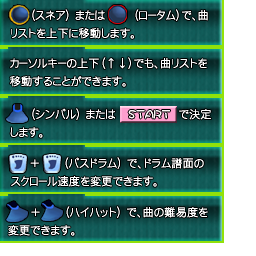
<style>
.page{position:relative;width:256px;height:256px}
.page>*{position:absolute;margin:0}
.t1{font:11px/18px "DFGothicP-W2-WING-RKSJ-H";color:#ffffff;font-weight:bold}
</style>
<div class="page">
<p class="t1" style="left:11px;top:9px;width:197px;height:30px">（スネア） または       （ロータム）で、曲<br>リストを上下に移動します。</p>
<p class="t1" style="left:10px;top:57px;width:197px;height:30px">カーソルキーの上下（↑↓）でも、曲リストを<br>移動することができます。</p>
<p class="t1" style="left:10px;top:108px;width:201px;height:30px">（シンバル） または                で決定<br>します。</p>
<p class="t1" style="left:11px;top:157px;width:193px;height:30px">＋      （バスドラム） で、ドラム譜面の<br>スクロール速度を変更できます。</p>
<p class="t1" style="left:8px;top:206px;width:200px;height:30px">+      （ハイハット） で、曲の難易度を<br>変更できます。</p>
</div>
